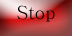
<style>
.page{position:relative;width:72px;height:36px}
.page>*{position:absolute;margin:0}
.t1{font:18px "Batang";color:#030303}
</style>
<div class="page">
<p class="t1" style="left:17px;top:5px;width:38px;height:17px">Stop</p>
</div>
